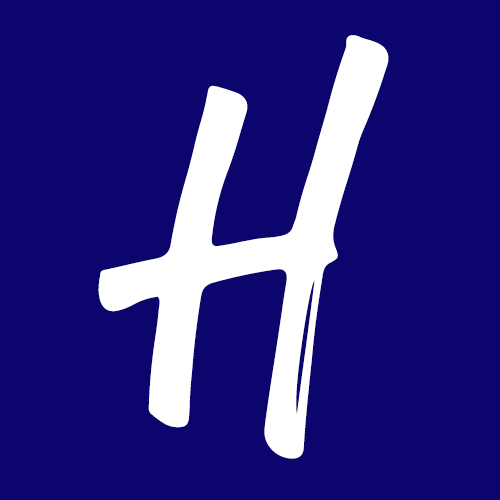
<style>
.page{position:relative;width:500px;height:500px;background:#0c056d}
.page>*{position:absolute;margin:0}
.t1{font:416.7px "RedRock";letter-spacing:0.025em;color:#ffffff}
</style>
<div class="page">
<p class="t1" style="left:98px;top:35px;width:291px;height:424px">H</p>
</div>
